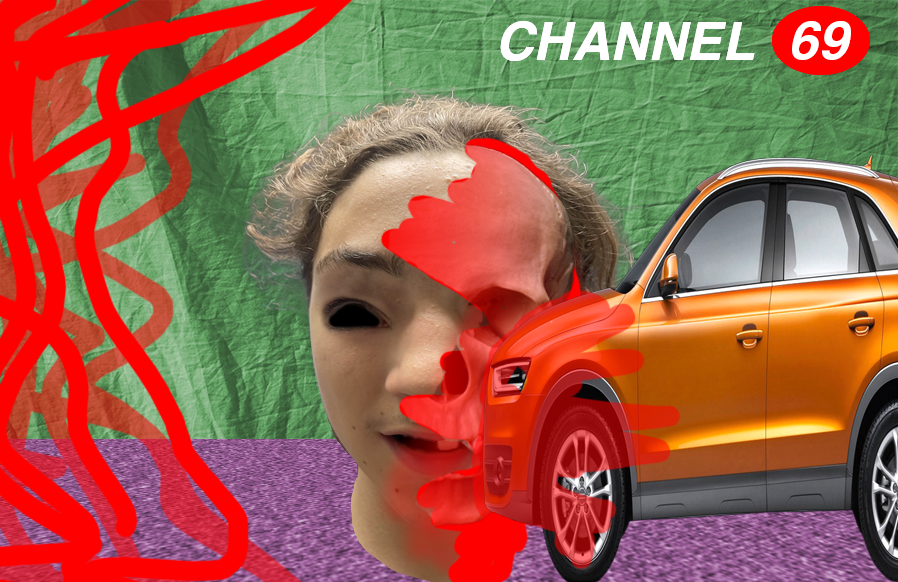
<style>
.page{position:relative;width:898px;height:582px}
.page>*{position:absolute;margin:0}
.t1{font:53px "HelveticaLTPro-BoldOblique";color:#ffffff}
</style>
<div class="page">
<p class="t1" style="left:500px;top:21px;width:255px;height:40px">CHANNEL</p>
<p class="t1" style="left:792px;top:21px;width:59px;height:39px">69</p>
</div>
